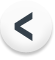
<style>
.page{position:relative;width:55px;height:60px;background:#fafafa}
.page>*{position:absolute;margin:0}
.t1{font:52.8px "Arial-BoldMT";letter-spacing:0.04em;color:#35404a;scale:0.67 1}
</style>
<div class="page">
<p class="t1" style="left:14px;top:12px;width:19px;height:29px">&lt;</p>
</div>
